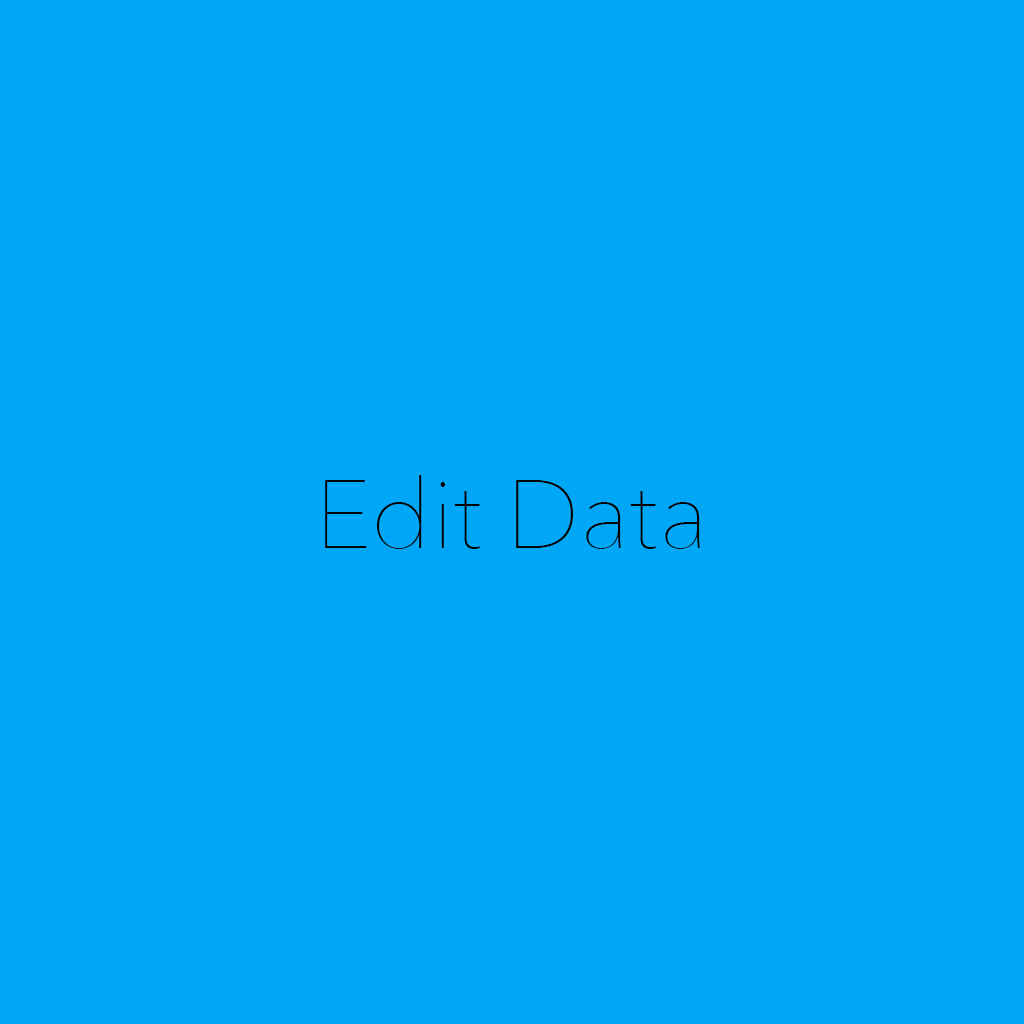
<style>
.page{position:relative;width:1024px;height:1024px;background:#00a7f6}
.page>*{position:absolute;margin:0}
.t1{font:96px "AvenirNext-UltraLight";color:#000000}
</style>
<div class="page">
<p class="t1" style="left:325px;top:475px;width:375px;height:74px">Edit Data</p>
</div>
